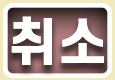
<style>
.page{position:relative;width:115px;height:80px;background:#ffffff}
.page>*{position:absolute;margin:0}
.t1{font:50.5px "S-CoreDream-6Bold";color:#ffffff;font-weight:bold}
</style>
<div class="page">
<p class="t1" style="left:11px;top:16px;width:93px;height:49px">취소</p>
</div>
